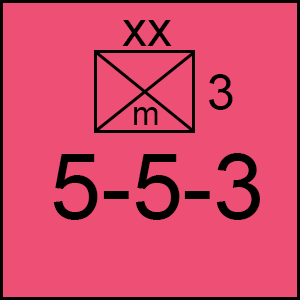
<style>
.page{position:relative;width:300px;height:300px;background:#ee4f74}
.page>*{position:absolute;margin:0}
.t1{font:50px "ArialMT";color:#000000}
.t2{font:33.3px "ArialMT";color:#000000}
.t3{font:91.7px "ArialMT";color:#000000}
</style>
<div class="page">
<p class="t1" style="left:122px;top:20px;width:50px;height:26px">xx</p>
<p class="t1" style="left:209px;top:74px;width:24px;height:36px">3</p>
<p class="t2" style="left:134px;top:107px;width:24px;height:18px">m</p>
<p class="t3" style="left:53px;top:153px;width:207px;height:67px">5-5-3</p>
</div>
